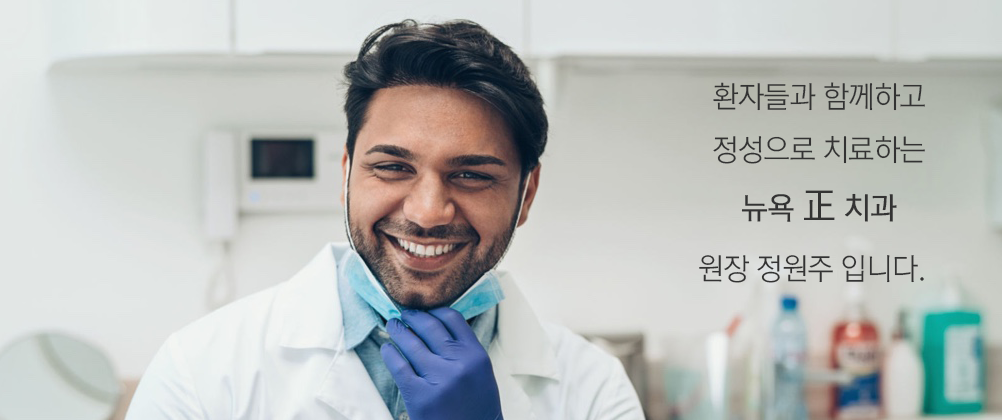
<style>
.page{position:relative;width:1002px;height:420px}
.page>*{position:absolute;margin:0}
.t1{font:30px "RixMGoL";letter-spacing:-0.015em;color:#333333;scale:0.97 1}
.t2{font:30px "RixMGoL";letter-spacing:-0.015em;color:#333333;font-weight:bold;scale:0.97 1}
.t3{font:38px "RixMGoL";letter-spacing:-0.015em;color:#333333;font-weight:bold;scale:0.97 1}
</style>
<div class="page">
<p class="t1" style="left:699px;top:82px;width:226px;height:201px;text-align:center">환자들과 함께하고<br>정성으로 치료하는<br><span class="t2">뉴욕 </span><span class="t3">正</span><span class="t2"> 치과<br></span>원장 정원주 입니다.</p>
</div>
